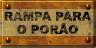
<style>
.page{position:relative;width:96px;height:48px}
.page>*{position:absolute;margin:0}
.t1{font:12px/13.3px "Arial-Black";letter-spacing:0.005em;text-transform:uppercase}
</style>
<div class="page">
<p class="t1" style="left:4px;top:11px;width:88px;height:23px;text-align:center">Rampa para<br>o porão</p>
</div>
